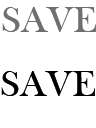
<style>
.page{position:relative;width:96px;height:128px;background:#ffffff}
.page>*{position:absolute;margin:0}
.t1{font:38px "BaskOldFace";color:#706f70}
.t2{font:38px "BaskOldFace";color:#000000}
</style>
<div class="page">
<p class="t1" style="left:2px;top:7px;width:94px;height:25px">SAVE</p>
<p class="t2" style="left:1px;top:71px;width:94px;height:25px">SAVE</p>
</div>
